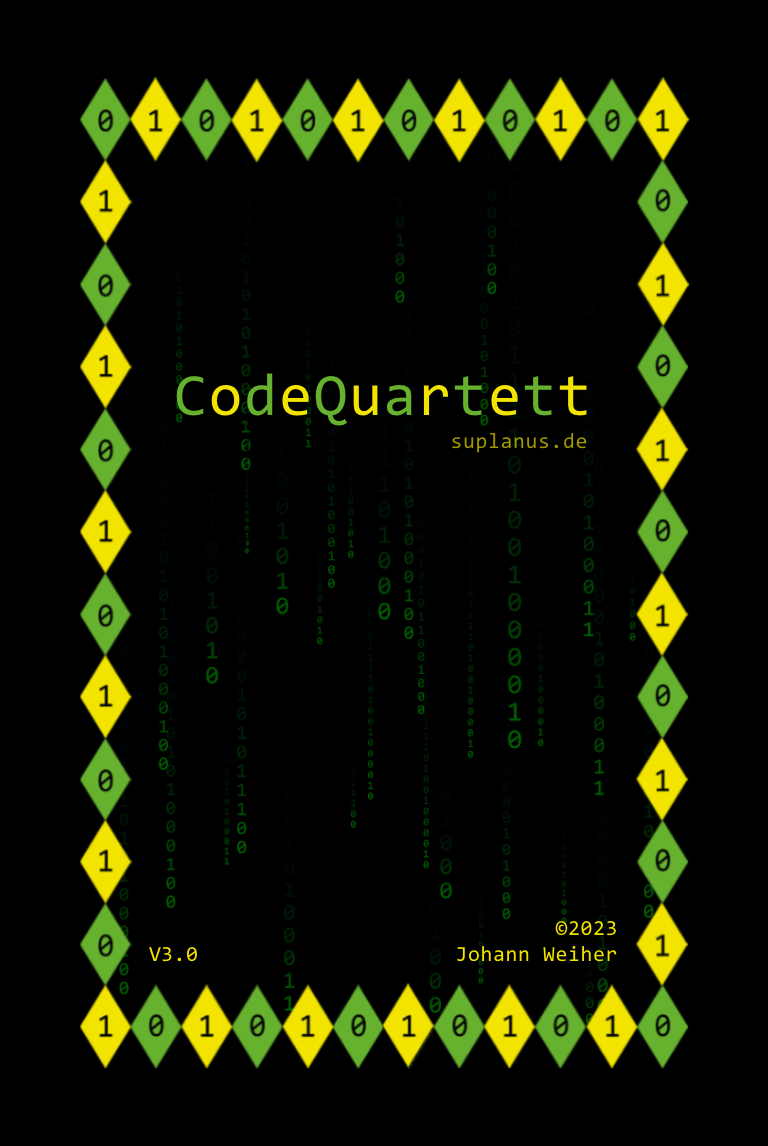
<style>
.page{position:relative;width:768px;height:1146px;background:#000000}
.page>*{position:absolute;margin:0}
.t1{font:60.2px "Consolas";letter-spacing:0.029em;color:#66b22e}
.t2{font:60.2px "Consolas";letter-spacing:0.029em;color:#f2e400}
.t3{font:21.6px "Consolas";letter-spacing:0.029em;color:#9f9700}
.t4{font:21.6px/25.5px "Consolas";letter-spacing:0.029em;color:#f2e400}
.t5{font:21.6px/16px "Consolas";letter-spacing:0.029em;color:#f2e400}
.t6{font:21.6px "Consolas";letter-spacing:0.029em;color:#f2e400}
</style>
<div class="page">
<p class="t1" style="left:176px;top:373px;width:411px;height:53px">C<span class="t2">o</span>d<span class="t2">e</span>Q<span class="t2">u</span>a<span class="t2">r</span>t<span class="t2">e</span>t<span class="t2">t</span></p>
<p class="t3" style="left:452px;top:433px;width:135px;height:20px">suplanus.de</p>
<p class="t4" style="left:457px;top:921px;width:160px;height:41px;text-align:right"><span class="t5">©2023<br></span>Johann Weiher</p>
<p class="t6" style="left:149px;top:947px;width:48px;height:15px">V3.0</p>
</div>
